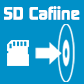
<style>
.page{position:relative;width:84px;height:84px;background:#0090c8}
.page>*{position:absolute;margin:0}
.t1{font:18px "ContinuumBold";color:#ffffff}
</style>
<div class="page">
<p class="t1" style="left:4px;top:6px;width:76px;height:14px">SD Cafiine</p>
</div>
